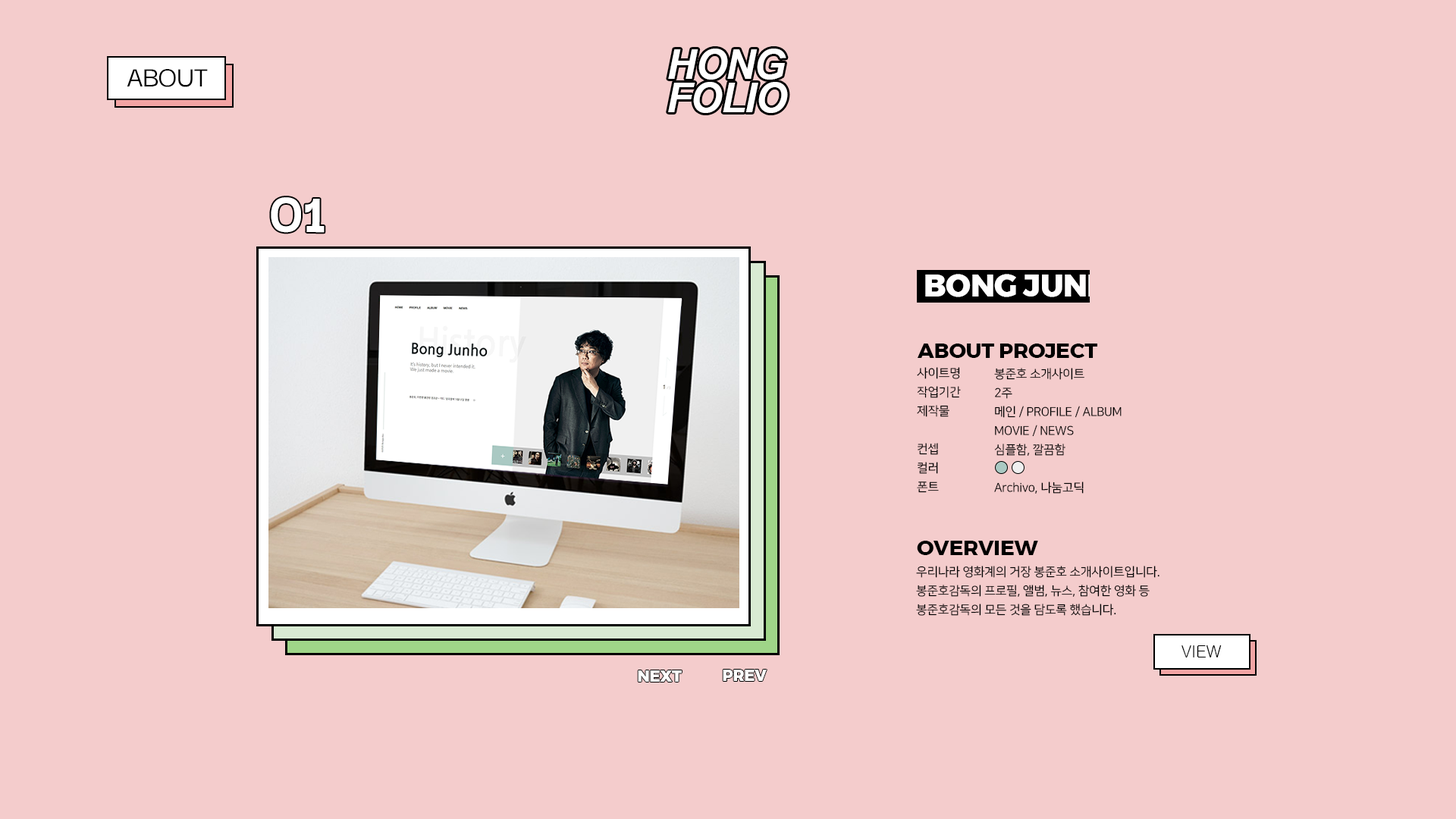
<style>
.page{position:relative;width:1456px;height:819px;background:#f4cccc}
.page>*{position:absolute;margin:0}
.t1{font:40.8px/33.1px "Arial-BoldItalicMT";letter-spacing:-0.03em;color:#ffffff}
.t2{font:30.3px "DarkerGrotesque-Medium";letter-spacing:-0.01em;color:#000000}
.t3{font:59.5px "DarkerGrotesque-ExtraBold";letter-spacing:-0.01em;color:#ffffff}
.t4{font:31.1px "Montserrat-ExtraBold";letter-spacing:-0.01em;color:#fefefe}
.t5{font:21px "Montserrat-Bold";letter-spacing:-0.01em;color:#000000}
.t6{font:12.1px/19px "NanumSquareR";letter-spacing:-0.01em;color:#000000}
.t7{font:17px "Gulim";letter-spacing:-0.01em;color:#000000}
.t8{font:15.7px "Montserrat-ExtraBold";letter-spacing:-0.01em;color:#fefefe}
</style>
<div class="page">
<p class="t1" style="left:668px;top:49px;width:120px;height:64px">HONG<br>FOLIO</p>
<p class="t2" style="left:127px;top:69px;width:81px;height:18px">ABOUT</p>
<p class="t3" style="left:271px;top:197px;width:54px;height:36px">01</p>
<p class="t4" style="left:925px;top:274px;width:211px;height:23px">BONG JUNHO</p>
<p class="t5" style="left:917px;top:344px;width:180px;height:14px">ABOUT PROJECT</p>
<p class="t6" style="left:917px;top:367px;width:44px;height:126px">사이트명<br>작업기간<br>제작물<br><br>컨셉<br>컬러<br>폰트</p>
<p class="t6" style="left:994px;top:368px;width:128px;height:126px">봉준호 소개사이트<br>2주<br>메인 / PROFILE / ALBUM<br>MOVIE / NEWS<br>심플함, 깔끔함<br><br>Archivo, 나눔고딕</p>
<p class="t5" style="left:917px;top:541px;width:121px;height:14px">OVERVIEW</p>
<p class="t6" style="left:916px;top:566px;width:243px;height:50px">우리나라 영화계의 거장 봉준호 소개사이트입니다.<br>봉준호감독의 프로필, 앨범, 뉴스, 참여한 영화 등 <br>봉준호감독의 모든 것을 담도록 했습니다.</p>
<p class="t7" style="left:1181px;top:645px;width:41px;height:12px">VIEW</p>
<p class="t8" style="left:638px;top:670px;width:44px;height:12px">NEXT</p>
<p class="t8" style="left:723px;top:670px;width:44px;height:11px">PREV</p>
</div>
